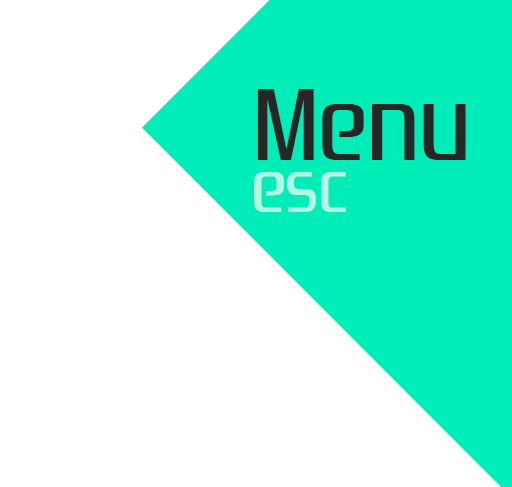
<style>
.page{position:relative;width:512px;height:487px;background:#ffffff}
.page>*{position:absolute;margin:0}
.t1{font:100px "ZrnicRg-Regular";color:#242726}
.t2{font:72px "ZrnicRg-Regular";color:#b4f8e3}
</style>
<div class="page">
<p class="t1" style="left:257px;top:89px;width:209px;height:71px">Menu</p>
<p class="t2" style="left:254px;top:172px;width:92px;height:40px">esc</p>
</div>
